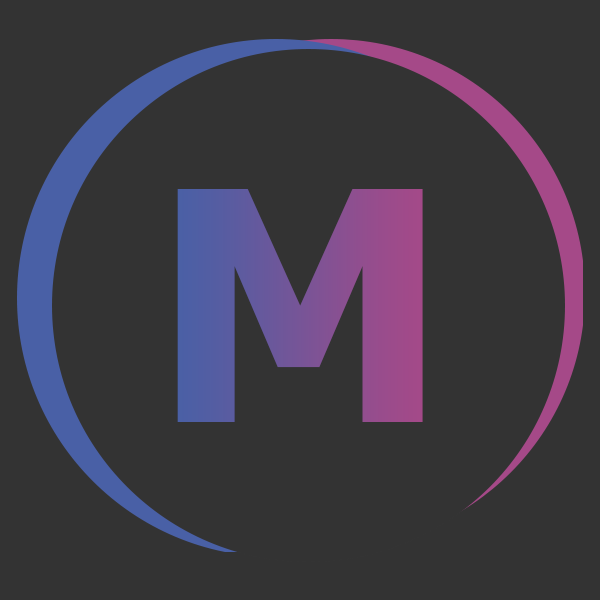
<style>
.page{position:relative;width:600px;height:600px;background:#333333}
.page>*{position:absolute;margin:0}
.t1{font:321px "Verdana-Bold"}
</style>
<div class="page">
<p class="t1" style="left:177px;top:189px;width:246px;height:233px">M</p>
</div>
